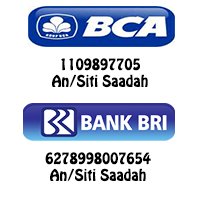
<style>
.page{position:relative;width:200px;height:200px;background:#ffffff}
.page>*{position:absolute;margin:0}
.t1{font:14px "HoboStd";color:#000000}
</style>
<div class="page">
<p class="t1" style="left:52px;top:58px;width:96px;height:30px;text-align:center">1109897705<br>An/Siti Saadah</p>
<p class="t1" style="left:45px;top:152px;width:106px;height:30px;text-align:center">6278998007654<br>An/Siti Saadah</p>
</div>
